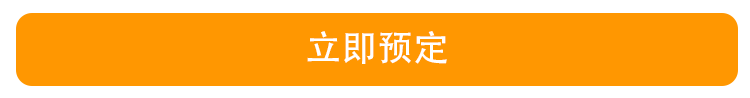
<style>
.page{position:relative;width:750px;height:98px;background:#ff9701}
.page>*{position:absolute;margin:0}
.t1{font:36px "AdobeHeitiStd-Regular";color:#ffffff}
</style>
<div class="page">
<p class="t1" style="left:307px;top:31px;width:140px;height:33px">立即预定</p>
</div>
